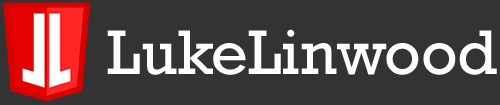
<style>
.page{position:relative;width:500px;height:105px;background:#333333}
.page>*{position:absolute;margin:0}
.t1{font:63.9px "Rockwell";color:#ffffff}
</style>
<div class="page">
<p class="t1" style="left:107px;top:29px;width:390px;height:46px">LukeLinwood</p>
</div>
